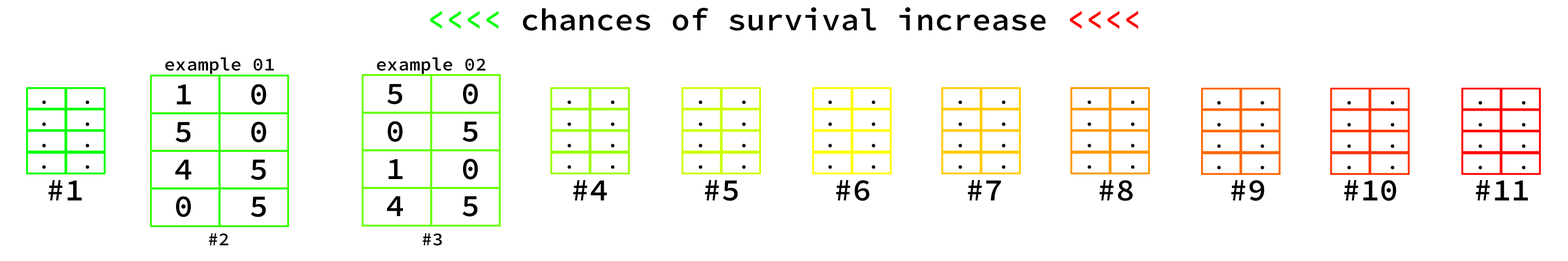
<style>
.page{position:relative;width:1568px;height:261px;background:#ffffff}
.page>*{position:absolute;margin:0}
.t1{font:31.3px "SourceCodeRoman-Semibold";color:#000000}
.t2{font:31.3px "SourceCodeRoman-Semibold";color:#00ff00}
.t3{font:31.3px "SourceCodeRoman-Semibold";color:#ff0000}
.t4{font:18.4px "SourceCodeRoman-Semibold";color:#000000}
.t5{font:17.9px "SourceCodeRoman-Semibold";color:#000000}
</style>
<div class="page">
<p class="t1" style="left:430px;top:7px;width:708px;height:24px"><span class="t2">&lt;&lt;&lt;&lt; </span>chances of survival increase <span class="t3">&lt;&lt;&lt;&lt;</span></p>
<p class="t4" style="left:165px;top:57px;width:109px;height:17px">example 01</p>
<p class="t4" style="left:377px;top:57px;width:109px;height:17px">example 02</p>
<p class="t1" style="left:175px;top:84px;width:92px;height:133px;text-align:center">1   0<br>5   0<br>4   5<br>0   5</p>
<p class="t1" style="left:387px;top:84px;width:91px;height:133px;text-align:center">5   0<br>0   5<br>1   0<br>4   5</p>
<p class="t5" style="left:42px;top:100px;width:47px;height:69px;text-align:center">.   .<br>.   .<br>.   .<br>.   .</p>
<p class="t5" style="left:568px;top:100px;width:47px;height:69px;text-align:center">.   .<br>.   .<br>.   .<br>.   .</p>
<p class="t5" style="left:699px;top:100px;width:47px;height:69px;text-align:center">.   .<br>.   .<br>.   .<br>.   .</p>
<p class="t5" style="left:828px;top:100px;width:47px;height:69px;text-align:center">.   .<br>.   .<br>.   .<br>.   .</p>
<p class="t5" style="left:959px;top:100px;width:47px;height:69px;text-align:center">.   .<br>.   .<br>.   .<br>.   .</p>
<p class="t5" style="left:1088px;top:100px;width:47px;height:69px;text-align:center">.   .<br>.   .<br>.   .<br>.   .</p>
<p class="t5" style="left:1217px;top:101px;width:47px;height:69px;text-align:center">.   .<br>.   .<br>.   .<br>.   .</p>
<p class="t5" style="left:1347px;top:101px;width:47px;height:69px;text-align:center">.   .<br>.   .<br>.   .<br>.   .</p>
<p class="t5" style="left:1479px;top:101px;width:47px;height:69px;text-align:center">.   .<br>.   .<br>.   .<br>.   .</p>
<p class="t1" style="left:48px;top:180px;width:34px;height:21px">#1</p>
<p class="t1" style="left:573px;top:180px;width:955px;height:21px">#4     #5     #6     #7     #8     #9    #10    #11</p>
<p class="t4" style="left:209px;top:234px;width:19px;height:12px">#2</p>
<p class="t4" style="left:422px;top:234px;width:20px;height:12px">#3</p>
</div>
